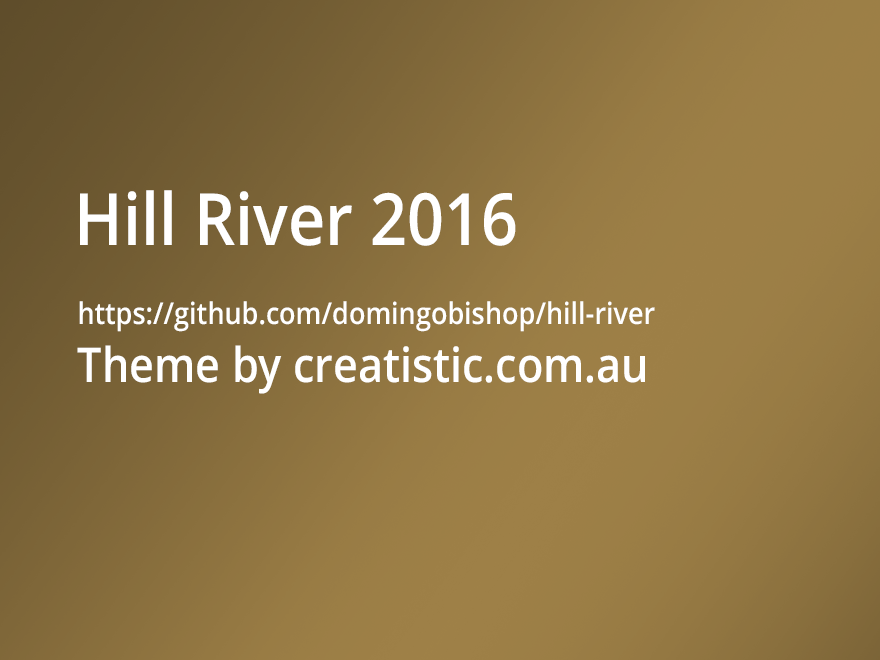
<style>
.page{position:relative;width:880px;height:660px}
.page>*{position:absolute;margin:0}
.t1{font:72px "OpenSans-Semibold";color:#ffffff;scale:0.9 1}
.t2{font:30px "OpenSans-Semibold";color:#ffffff;scale:0.9 1}
.t3{font:48px "OpenSans-Semibold";color:#ffffff;scale:0.9 1}
</style>
<div class="page">
<p class="t1" style="left:80px;top:190px;width:436px;height:56px">Hill River 2016</p>
<p class="t2" style="left:77px;top:301px;width:578px;height:93px">https://github.com/domingobishop/hill-river<br><span class="t3">Theme by creatistic.com.au</span></p>
</div>
